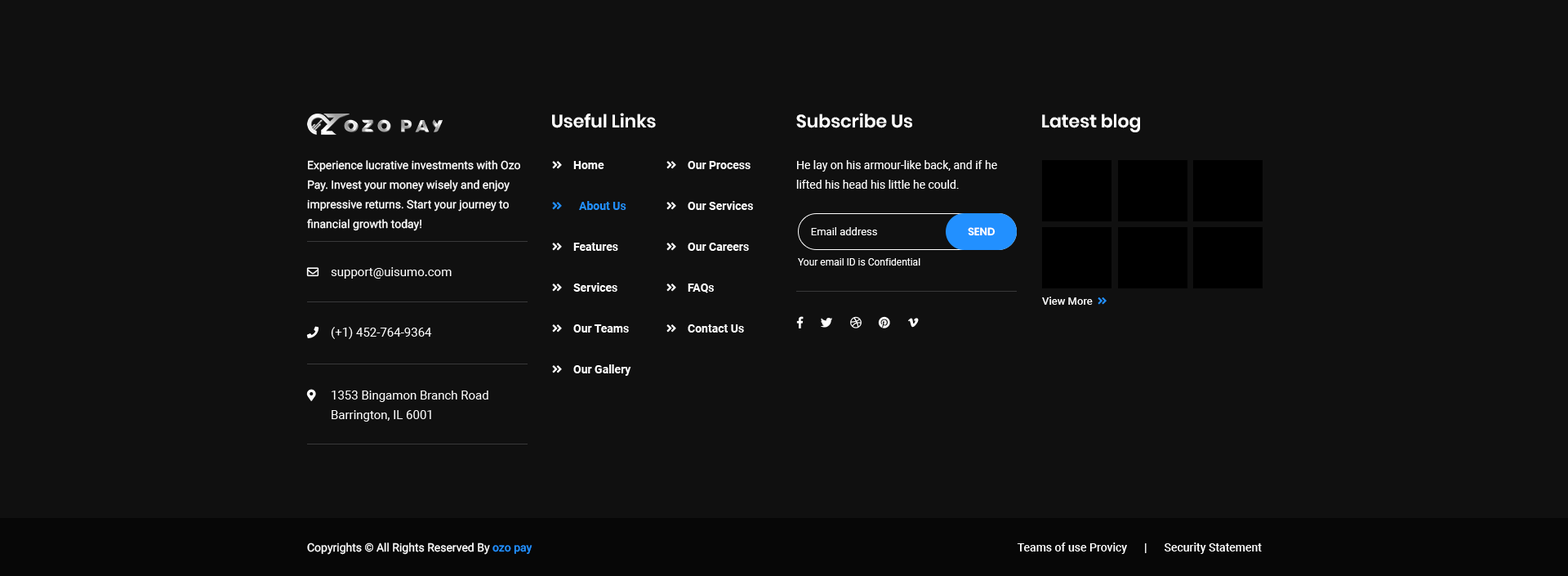
<style>
.page{position:relative;width:1568px;height:576px;background:#101010}
.page>*{position:absolute;margin:0}
.t1{font:18px "Poppins-SemiBold";color:#ffffff}
.t2{font:18px "Poppins-SemiBold";color:#ffffff;text-transform:uppercase}
.t3{font:11.4px/19.6px "Roboto-Regular";color:#ffffff}
.t4{font:11.4px/40.8px "Roboto-Bold";color:#ffffff}
.t5{font:11.4px/40.8px "Roboto-Bold";color:#2290ff}
.t6{font:10.6px "Roboto-Regular";color:#ffffff}
.t7{font:10.6px "Poppins-SemiBold";color:#ffffff;text-transform:uppercase}
.t8{font:12.2px "Roboto-Regular";color:#ffffff}
.t9{font:9.8px "Roboto-Regular";color:#ffffff}
.t10{font:12.2px/19.6px "Roboto-Regular";color:#ffffff}
.t11{font:11.4px "Roboto-Regular";color:#ffffff}
.t12{font:11.4px "Roboto-Medium";color:#2290ff}
.t13{font:11.4px "Roboto-Medium";color:#ffffff}
</style>
<div class="page">
<p class="t1" style="left:552px;top:113px;width:104px;height:15px">Useful Links</p>
<p class="t1" style="left:796px;top:113px;width:116px;height:15px">Subscribe Us</p>
<p class="t1" style="left:1042px;top:114px;width:98px;height:18px"><span class="t2">l</span>atest blog</p>
<p class="t3" style="left:307px;top:160px;width:213px;height:71px">Experience lucrative investments with Ozo Pay. Invest your money wisely and enjoy impressive returns. Start your journey to financial growth today!</p>
<p class="t4" style="left:573px;top:161px;width:58px;height:215px">Home<br><span class="t5">  About Us<br></span>Features<br>Services<br>Our Teams<br>Our Gallery</p>
<p class="t4" style="left:688px;top:161px;width:65px;height:171px">Our Process<br>Our Services<br>Our Careers<br>FAQs<br>Contact Us</p>
<p class="t3" style="left:796px;top:160px;width:201px;height:29px">He lay on his armour-like back, and if he lifted his head his little he could.</p>
<p class="t6" style="left:811px;top:227px;width:66px;height:8px">Email address</p>
<p class="t7" style="left:968px;top:227px;width:28px;height:9px">Send</p>
<p class="t8" style="left:331px;top:267px;width:121px;height:11px">support@uisumo.com</p>
<p class="t9" style="left:798px;top:258px;width:122px;height:7px">Your email ID is Confidential</p>
<p class="t8" style="left:331px;top:327px;width:101px;height:12px">(+1) 452-764-9364</p>
<p class="t10" style="left:332px;top:390px;width:156px;height:31px">1353 Bingamon Branch Road<br>Barrington, IL 6001</p>
<p class="t11" style="left:307px;top:542px;width:225px;height:13px">Copyrights © All Rights Reserved By <span class="t12">ozo pay</span></p>
<p class="t13" style="left:1017px;top:542px;width:245px;height:12px">Teams of use Provicy      |      Security Statement</p>
</div>
